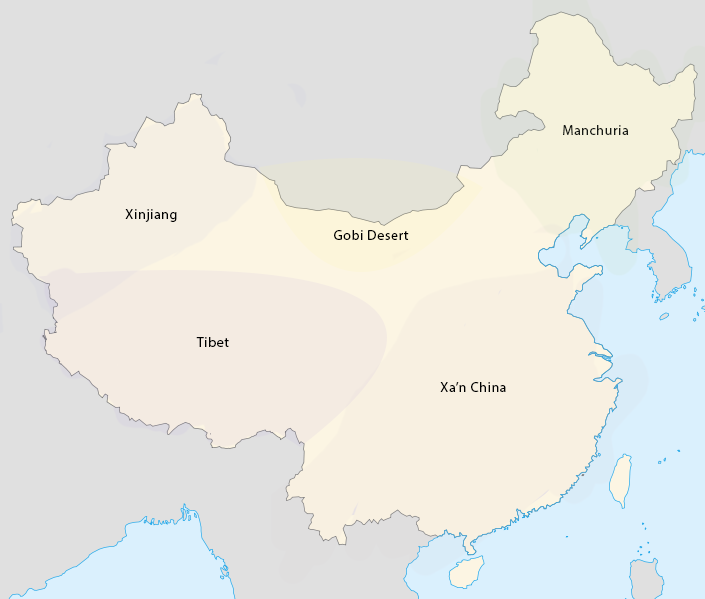
<style>
.page{position:relative;width:705px;height:599px;background:#e0e0e0}
.page>*{position:absolute;margin:0}
.t1{font:14px "MyriadPro-Regular";letter-spacing:0.04em;color:#171a15}
.t2{font:14px "MyriadPro-Regular";letter-spacing:0.04em;color:#000000}
</style>
<div class="page">
<p class="t1" style="left:563px;top:125px;width:66px;height:10px">Manchuria</p>
<p class="t2" style="left:125px;top:209px;width:52px;height:13px">Xinjiang</p>
<p class="t2" style="left:334px;top:230px;width:75px;height:10px">Gobi Desert</p>
<p class="t2" style="left:196px;top:337px;width:33px;height:10px">Tibet</p>
<p class="t2" style="left:440px;top:382px;width:66px;height:10px">Xa’n China</p>
</div>
